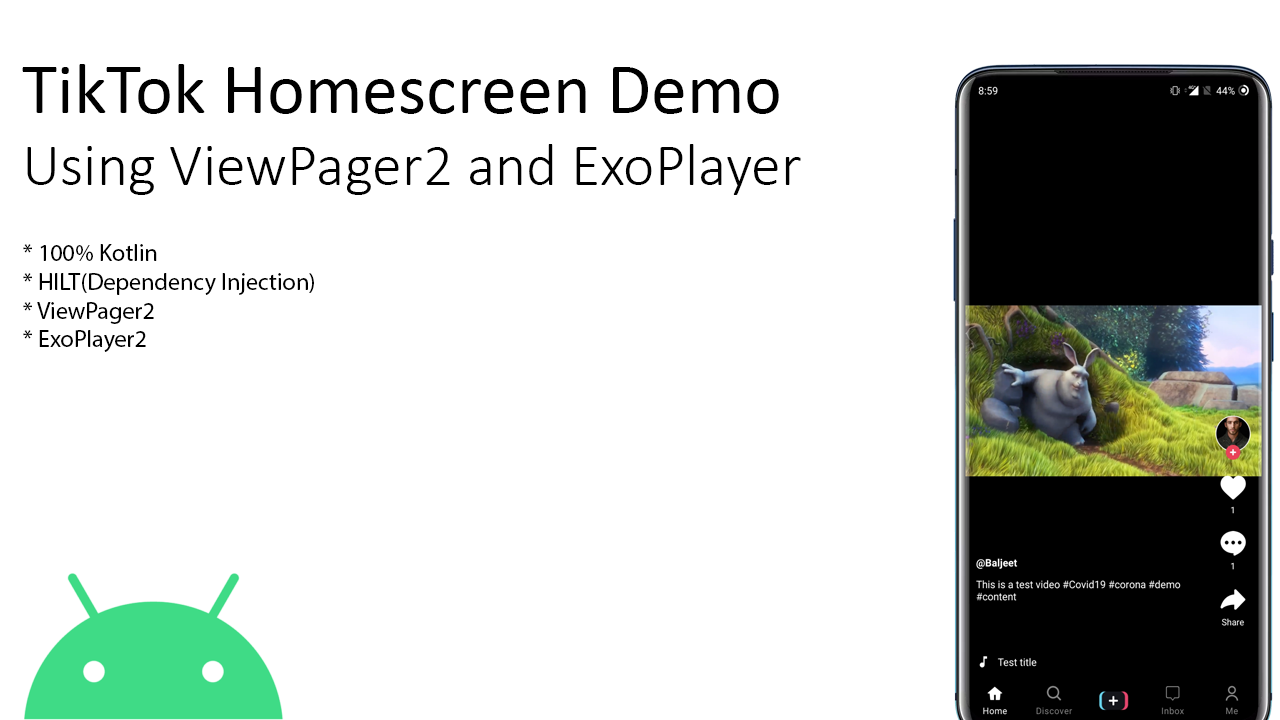
<style>
.page{position:relative;width:1280px;height:720px;background:#ffffff}
.page>*{position:absolute;margin:0}
.t1{font:60px "Calibri-Light";color:#000000}
.t2{font:72px "Calibri";color:#000000}
.t3{font:24px "MyriadPro-Regular";color:#000000}
</style>
<div class="page">
<p class="t1" style="left:22px;top:64px;width:779px;height:131px"><span class="t2">TikTok Homescreen Demo<br></span>Using ViewPager2 and ExoPlayer</p>
<p class="t3" style="left:23px;top:244px;width:291px;height:108px">* 100% Kotlin<br>* HILT(Dependency Injection)<br>* ViewPager2<br>* ExoPlayer2</p>
</div>
